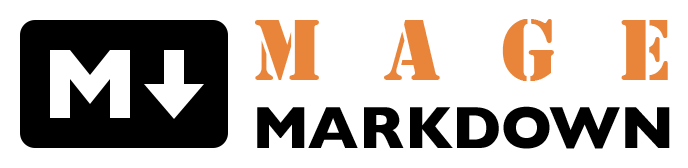
<style>
.page{position:relative;width:688px;height:168px;background:#ffffff}
.page>*{position:absolute;margin:0}
.t1{font:90px "Stencil";letter-spacing:0.68em;color:#e8853a}
.t2{font:60px "GillSans-Bold";color:#000000}
</style>
<div class="page">
<p class="t1" style="left:255px;top:19px;width:413px;height:62px">Mage</p>
<p class="t2" style="left:257px;top:106px;width:413px;height:43px">MARKDOWN</p>
</div>
